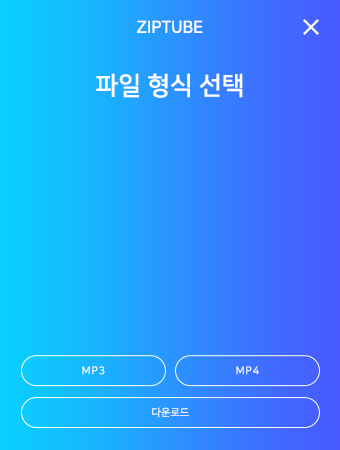
<style>
.page{position:relative;width:340px;height:450px}
.page>*{position:absolute;margin:0}
.t1{font:16.7px "NanumSquareB";color:#ffffff}
.t2{font:25px "NanumSquareB";color:#ffffff}
.t3{font:10.4px "NanumSquareR";letter-spacing:0.1em;color:#ffffff}
.t4{font:10.4px "NanumSquareR";color:#ffffff}
</style>
<div class="page">
<p class="t1" style="left:137px;top:20px;width:66px;height:13px">ZIPTUBE</p>
<p class="t2" style="left:96px;top:73px;width:147px;height:25px">파일 형식 선택</p>
<p class="t3" style="left:82px;top:366px;width:23px;height:9px">MP3</p>
<p class="t3" style="left:236px;top:366px;width:23px;height:9px">MP4</p>
<p class="t4" style="left:152px;top:407px;width:37px;height:11px">다운로드</p>
</div>
